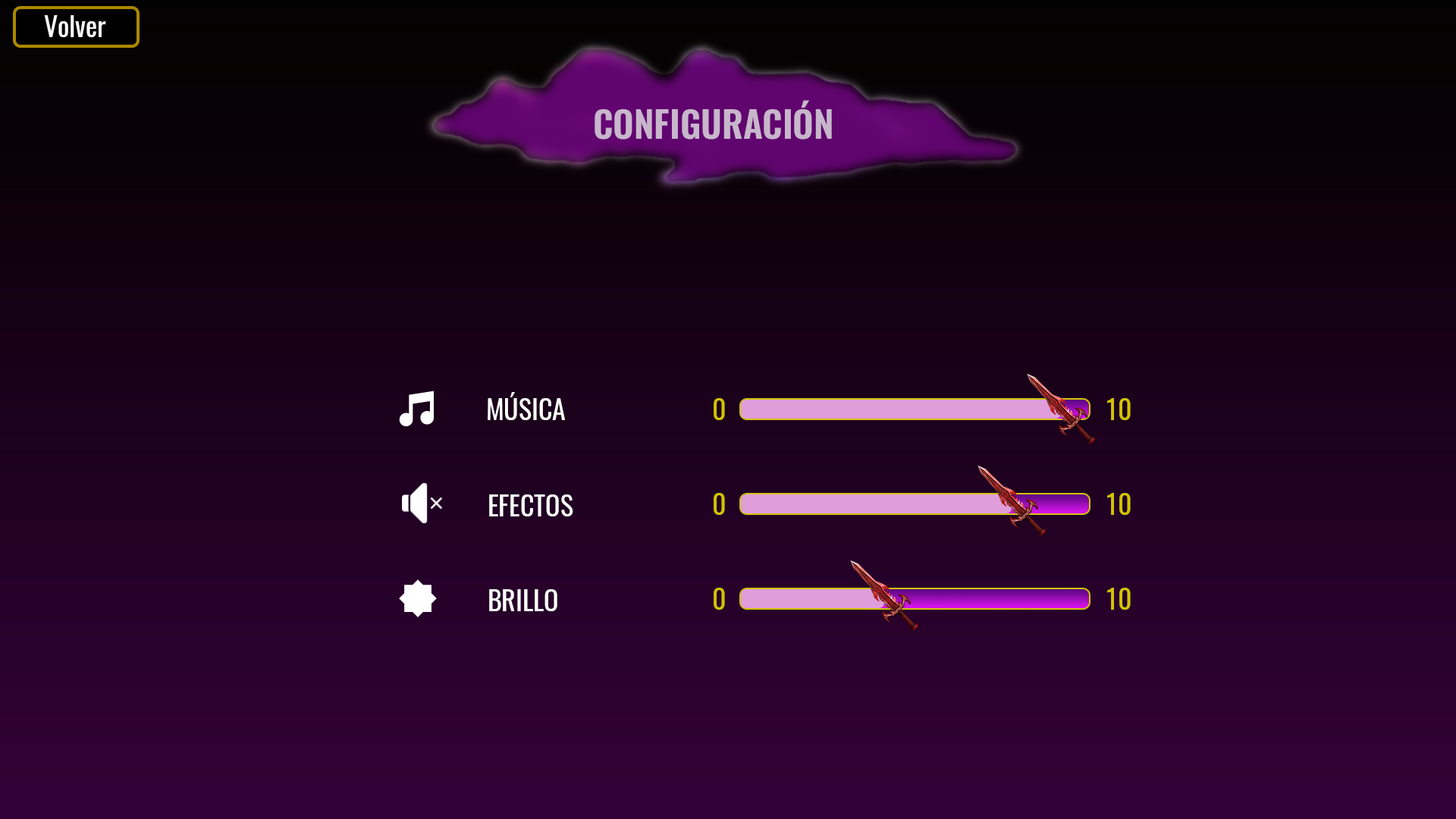
<style>
.page{position:relative;width:1456px;height:819px}
.page>*{position:absolute;margin:0}
.t1{font:27.3px "Oswald-Regular";color:#ffffff}
.t2{font:36.4px "Oswald-SemiBold";color:#c8b6cc}
.t3{font:27.3px "Oswald-Regular";color:#d4c304}
</style>
<div class="page">
<p class="t1" style="left:44px;top:15px;width:62px;height:22px">Volver</p>
<p class="t2" style="left:595px;top:100px;width:237px;height:40px">CONFIGURACIÓN</p>
<p class="t1" style="left:488px;top:392px;width:77px;height:28px">MÚSICA</p>
<p class="t3" style="left:714px;top:398px;width:11px;height:22px">0</p>
<p class="t3" style="left:1107px;top:398px;width:24px;height:22px">10</p>
<p class="t1" style="left:489px;top:494px;width:84px;height:22px">EFECTOS</p>
<p class="t3" style="left:714px;top:493px;width:11px;height:22px">0</p>
<p class="t3" style="left:1107px;top:493px;width:24px;height:22px">10</p>
<p class="t1" style="left:489px;top:589px;width:68px;height:22px">BRILLO</p>
<p class="t3" style="left:714px;top:588px;width:11px;height:22px">0</p>
<p class="t3" style="left:1107px;top:588px;width:24px;height:22px">10</p>
</div>
